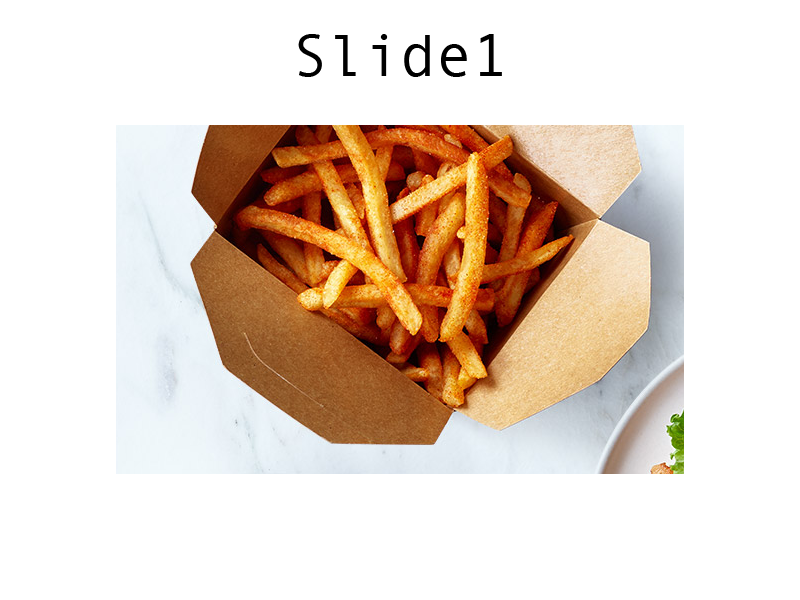
<style>
.page{position:relative;width:800px;height:600px;background:#ffffff}
.page>*{position:absolute;margin:0}
.t1{font:60px "AndaleMono";color:#000000}
</style>
<div class="page">
<p class="t1" style="left:298px;top:34px;width:204px;height:43px">Slide1</p>
</div>
